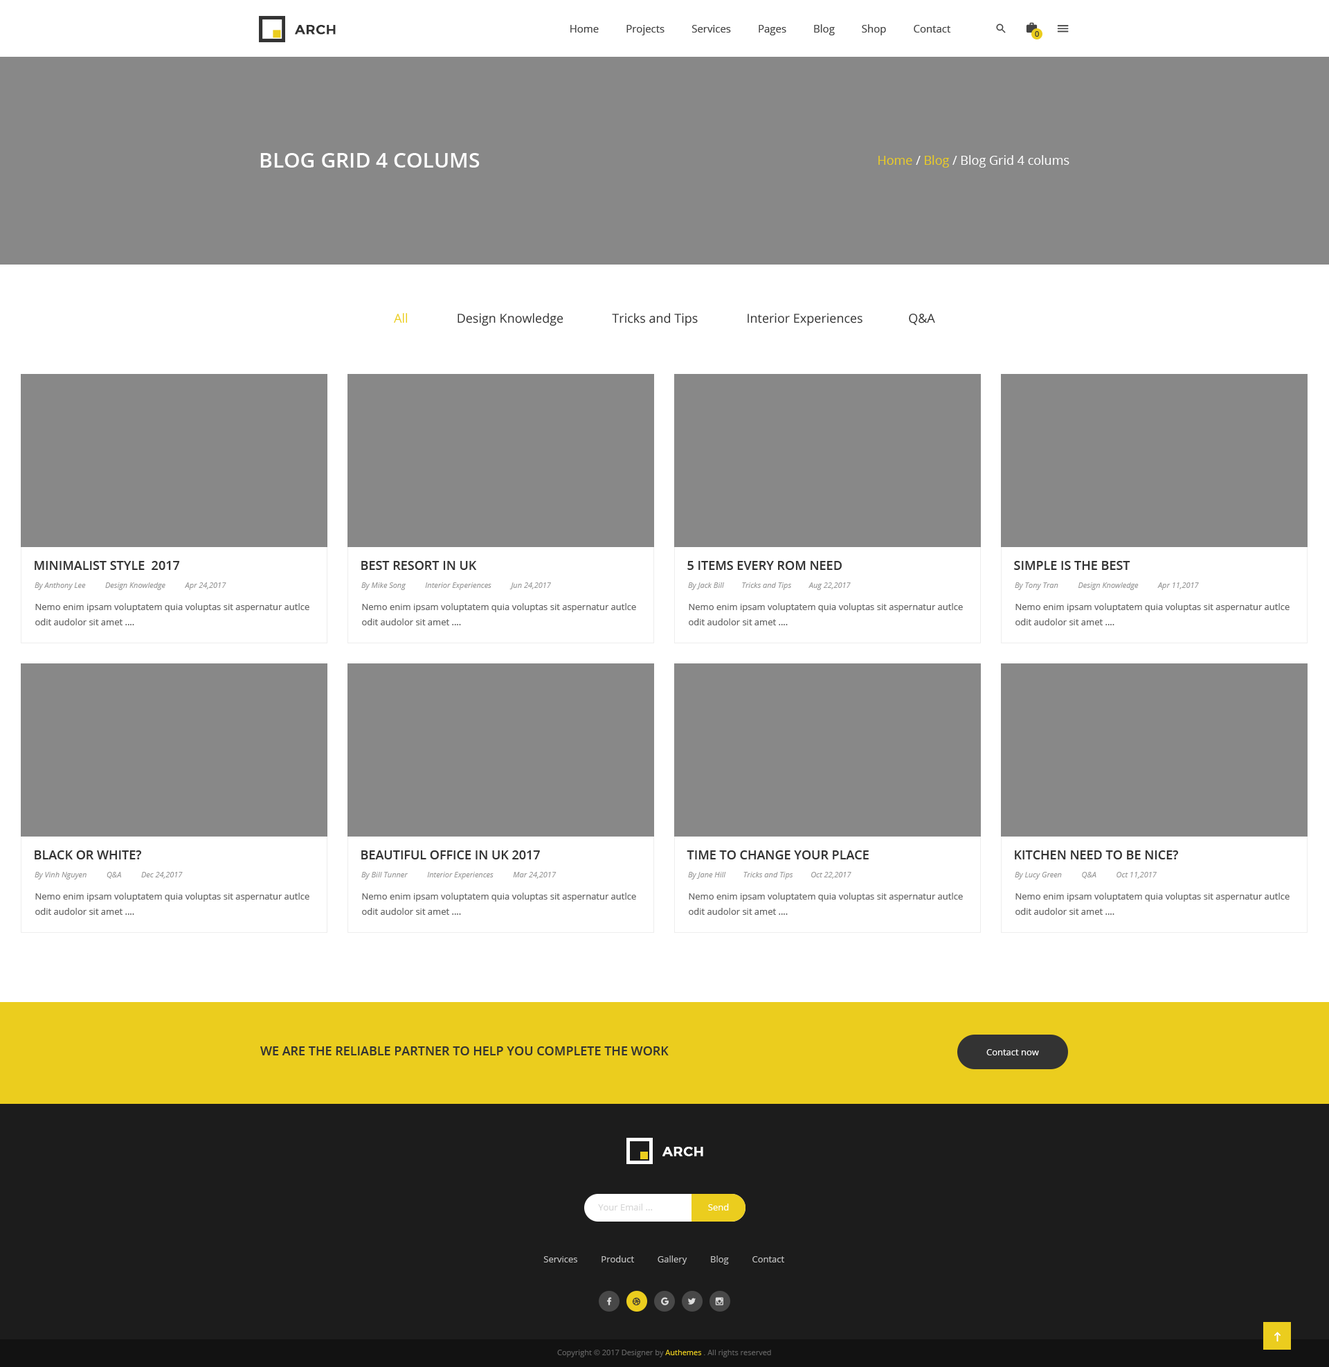
<style>
.page{position:relative;width:1329px;height:1367px;background:#888888}
.page>*{position:absolute;margin:0}
.t1{font:13.2px "Montserrat-Medium";letter-spacing:0.025em;color:#333333;text-transform:uppercase;font-weight:bold}
.t2{font:10.4px "OpenSans";color:#444444}
.t3{font:7.6px "OpenSans";color:#333333}
.t4{font:20.8px "OpenSans-Semibold";color:#ffffff;text-transform:uppercase}
.t5{font:12.5px "OpenSans-Regular";color:#ffffff}
.t6{font:12.5px "OpenSans-Regular";color:#ebcd1e}
.t7{font:12.5px "OpenSans";color:#333333}
.t8{font:12.5px "OpenSans";color:#ebcd1e}
.t9{font:12.5px "OpenSans-Semibold";color:#333333;text-transform:uppercase}
.t10{font:7.6px "OpenSans-Italic";color:#999999}
.t11{font:9px/15.2px "OpenSans";color:#666666}
.t12{font:9px "OpenSans";color:#ffffff}
.t13{font:13.2px "Montserrat-Medium";letter-spacing:0.025em;color:#ffffff;text-transform:uppercase;font-weight:bold}
.t14{font:9px "OpenSans";color:#d6d6d6}
.t15{font:9px "OpenSans";color:#c2c2c2}
.t16{font:7.6px "OpenSans";color:#626262}
.t17{font:7.6px "OpenSans";color:#ebcd1e}
</style>
<div class="page">
<p class="t1" style="left:295px;top:25px;width:41px;height:10px">arch</p>
<p class="t2" style="left:570px;top:24px;width:381px;height:11px">Home          Projects          Services          Pages          Blog          Shop          Contact</p>
<p class="t3" style="left:1035px;top:31px;width:4px;height:6px">0</p>
<p class="t4" style="left:260px;top:153px;width:220px;height:15px">blog grid 4 colums</p>
<p class="t5" style="left:879px;top:155px;width:191px;height:13px"><span class="t6">Home </span>/ <span class="t6">Blog </span>/ Blog Grid 4 colums</p>
<p class="t7" style="left:394px;top:313px;width:541px;height:13px"><span class="t8">All</span>               Design Knowledge               Tricks and Tips               Interior Experiences              Q&amp;A</p>
<p class="t9" style="left:35px;top:561px;width:145px;height:9px">Minimalist style  2017</p>
<p class="t9" style="left:361px;top:561px;width:116px;height:9px">Best resort in uk</p>
<p class="t9" style="left:687px;top:561px;width:155px;height:9px">5 items every rom need</p>
<p class="t9" style="left:1014px;top:561px;width:117px;height:9px">Simple is the best</p>
<p class="t10" style="left:35px;top:582px;width:191px;height:8px">By Anthony Lee          Design Knowledge          Apr 24,2017</p>
<p class="t10" style="left:361px;top:582px;width:190px;height:8px">By Mike Song          Interior Experiences          Jun 24,2017</p>
<p class="t10" style="left:688px;top:582px;width:163px;height:8px">By Jack Bill         Tricks and Tips         Aug 22,2017</p>
<p class="t10" style="left:1015px;top:582px;width:184px;height:8px">By Tony Tran          Design Knowledge          Apr 11,2017</p>
<p class="t11" style="left:35px;top:603px;width:274px;height:22px">Nemo enim ipsam voluptatem quia voluptas sit aspernatur autlce odit audolor sit amet ....</p>
<p class="t11" style="left:362px;top:603px;width:274px;height:22px">Nemo enim ipsam voluptatem quia voluptas sit aspernatur autlce odit audolor sit amet ....</p>
<p class="t11" style="left:689px;top:603px;width:274px;height:22px">Nemo enim ipsam voluptatem quia voluptas sit aspernatur autlce odit audolor sit amet ....</p>
<p class="t11" style="left:1016px;top:603px;width:274px;height:22px">Nemo enim ipsam voluptatem quia voluptas sit aspernatur autlce odit audolor sit amet ....</p>
<p class="t9" style="left:35px;top:850px;width:106px;height:9px">Black or white?</p>
<p class="t9" style="left:361px;top:850px;width:179px;height:9px">Beautiful office in uk 2017</p>
<p class="t9" style="left:687px;top:850px;width:182px;height:9px">Time to change your place</p>
<p class="t9" style="left:1015px;top:850px;width:163px;height:9px">Kitchen need to be nice?</p>
<p class="t10" style="left:35px;top:872px;width:148px;height:7px">By Vinh Nguyen          Q&amp;A          Dec 24,2017</p>
<p class="t10" style="left:361px;top:872px;width:196px;height:7px">By Bill Tunner          Interior Experiences          Mar 24,2017</p>
<p class="t10" style="left:688px;top:872px;width:164px;height:7px">By Jane Hill         Tricks and Tips         Oct 22,2017</p>
<p class="t10" style="left:1015px;top:872px;width:142px;height:7px">By Lucy Green          Q&amp;A          Oct 11,2017</p>
<p class="t11" style="left:35px;top:892px;width:274px;height:23px">Nemo enim ipsam voluptatem quia voluptas sit aspernatur autlce odit audolor sit amet ....</p>
<p class="t11" style="left:362px;top:892px;width:274px;height:23px">Nemo enim ipsam voluptatem quia voluptas sit aspernatur autlce odit audolor sit amet ....</p>
<p class="t11" style="left:689px;top:892px;width:274px;height:23px">Nemo enim ipsam voluptatem quia voluptas sit aspernatur autlce odit audolor sit amet ....</p>
<p class="t11" style="left:1016px;top:892px;width:274px;height:23px">Nemo enim ipsam voluptatem quia voluptas sit aspernatur autlce odit audolor sit amet ....</p>
<p class="t9" style="left:260px;top:1046px;width:409px;height:9px">We are the reliable partner to help you complete the work</p>
<p class="t12" style="left:987px;top:1049px;width:52px;height:6px">Contact now</p>
<p class="t13" style="left:663px;top:1146px;width:40px;height:10px">arch</p>
<p class="t14" style="left:598px;top:1203px;width:55px;height:7px">Your Email ...</p>
<p class="t12" style="left:708px;top:1203px;width:21px;height:7px">Send</p>
<p class="t15" style="left:543px;top:1255px;width:241px;height:9px">Services          Product          Gallery          Blog          Contact</p>
<p class="t16" style="left:557px;top:1349px;width:214px;height:8px">Copyright © 2017 Designer by <span class="t17">Authemes </span>. All rights reserved</p>
</div>
